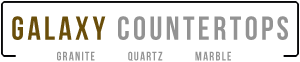
<style>
.page{position:relative;width:300px;height:62px;background:#ffffff}
.page>*{position:absolute;margin:0}
.t1{font:33.1px "BebasNeue";letter-spacing:0.1em;color:#939393}
.t2{font:33.1px "BebasNeue";letter-spacing:0.1em;color:#6a4e0a}
.t3{font:12.4px "BebasNeue";letter-spacing:0.1em;color:#939393}
</style>
<div class="page">
<p class="t1" style="left:12px;top:16px;width:276px;height:24px"><span class="t2">Galaxy </span>Countertops</p>
<p class="t3" style="left:57px;top:51px;width:174px;height:10px">Granite          Quartz          Marble</p>
</div>
